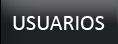
<style>
.page{position:relative;width:118px;height:44px;background:#1f2326}
.page>*{position:absolute;margin:0}
.t1{font:22px "Calibri";color:#ffffff}
</style>
<div class="page">
<p class="t1" style="left:13px;top:16px;width:92px;height:14px">USUARIOS</p>
</div>
